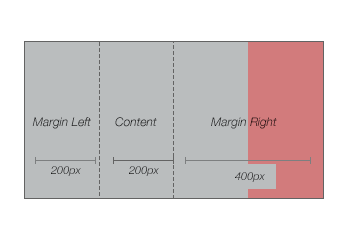
<style>
.page{position:relative;width:350px;height:239px;background:#ffffff}
.page>*{position:absolute;margin:0}
.t1{font:12px "HelveticaNeue-LightItalic"}
.t2{font:11px "HelveticaNeue-LightItalic"}
</style>
<div class="page">
<p class="t1" style="left:32px;top:117px;width:59px;height:12px">Margin Left</p>
<p class="t1" style="left:115px;top:117px;width:42px;height:10px">Content</p>
<p class="t1" style="left:211px;top:117px;width:66px;height:12px">Margin Right</p>
<p class="t2" style="left:51px;top:166px;width:30px;height:10px">200px</p>
<p class="t2" style="left:129px;top:166px;width:30px;height:10px">200px</p>
<p class="t2" style="left:235px;top:172px;width:30px;height:10px">400px</p>
</div>
